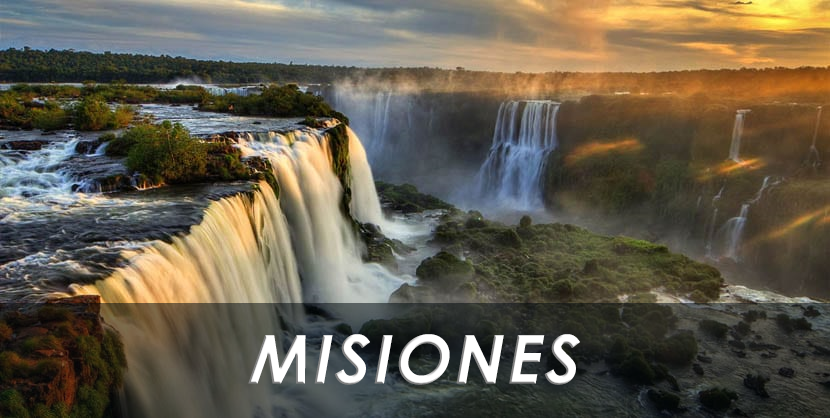
<style>
.page{position:relative;width:830px;height:418px}
.page>*{position:absolute;margin:0}
.t1{font:66.7px "CenturyGothic-Bold";letter-spacing:0.05em;color:#ffffff;font-style:italic}
</style>
<div class="page">
<p class="t1" style="left:248px;top:334px;width:332px;height:51px">MISIONES</p>
</div>
